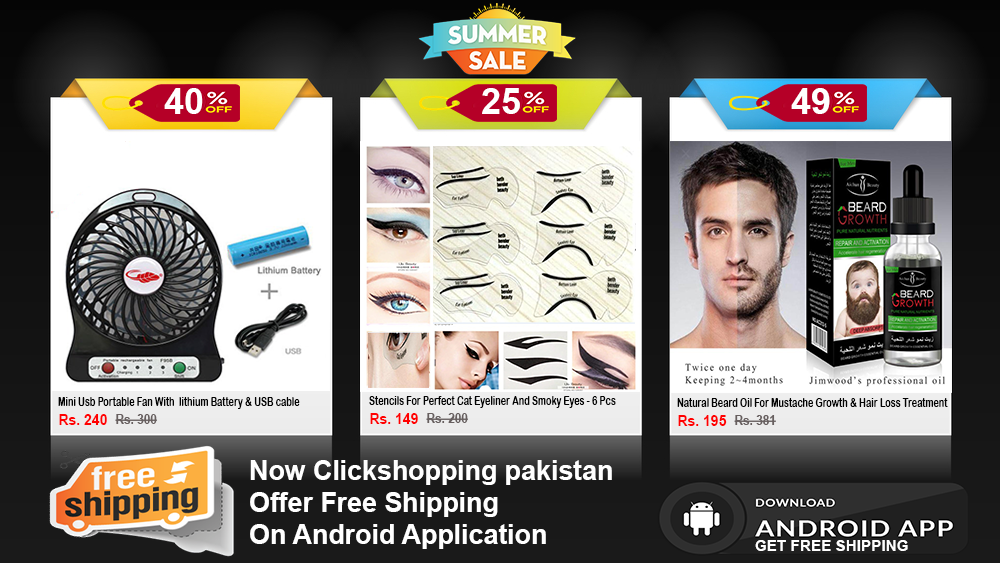
<style>
.page{position:relative;width:1000px;height:563px}
.page>*{position:absolute;margin:0}
.t1{font:36px "Arial-BoldMT";color:#ffffff}
.t2{font:12.5px "ArialRoundedMTBold";color:#030303;scale:0.72 1}
.t3{font:15.4px "Arial-BoldMT";color:#ff0101;scale:0.9 1}
.t4{font:13.1px "Arial-BoldMT";color:#675f5f;scale:0.9 1}
.t5{font:26.8px "Arial-BoldMT";color:#ffffff}
.t6{font:15.2px "Arial-BoldMT";color:#ffffff}
</style>
<div class="page">
<p class="t1" style="left:164px;top:88px;width:39px;height:26px">40</p>
<p class="t1" style="left:482px;top:88px;width:38px;height:26px">25</p>
<p class="t1" style="left:791px;top:88px;width:39px;height:26px">49</p>
<p class="t2" style="left:58px;top:397px;width:242px;height:12px">Mini Usb Portable Fan With  lithium Battery &amp; USB cable</p>
<p class="t2" style="left:369px;top:396px;width:247px;height:12px">Stencils For Perfect Cat Eyeliner And Smoky Eyes - 6 Pcs</p>
<p class="t2" style="left:677px;top:398px;width:271px;height:9px">Natural Beard Oil For Mustache Growth &amp; Hair Loss Treatment</p>
<p class="t3" style="left:59px;top:414px;width:48px;height:11px">Rs. 240</p>
<p class="t4" style="left:115px;top:414px;width:42px;height:10px">Rs. 300</p>
<p class="t3" style="left:370px;top:413px;width:48px;height:11px">Rs. 149</p>
<p class="t4" style="left:426px;top:413px;width:42px;height:10px">Rs. 200</p>
<p class="t3" style="left:678px;top:415px;width:49px;height:11px">Rs. 195</p>
<p class="t4" style="left:734px;top:415px;width:42px;height:10px">Rs. 381</p>
<p class="t5" style="left:250px;top:460px;width:362px;height:89px">Now Clickshopping pakistan<br>Offer Free Shipping<br>On Android Application</p>
<p class="t6" style="left:755px;top:540px;width:153px;height:11px">GET FREE SHIPPING</p>
</div>
